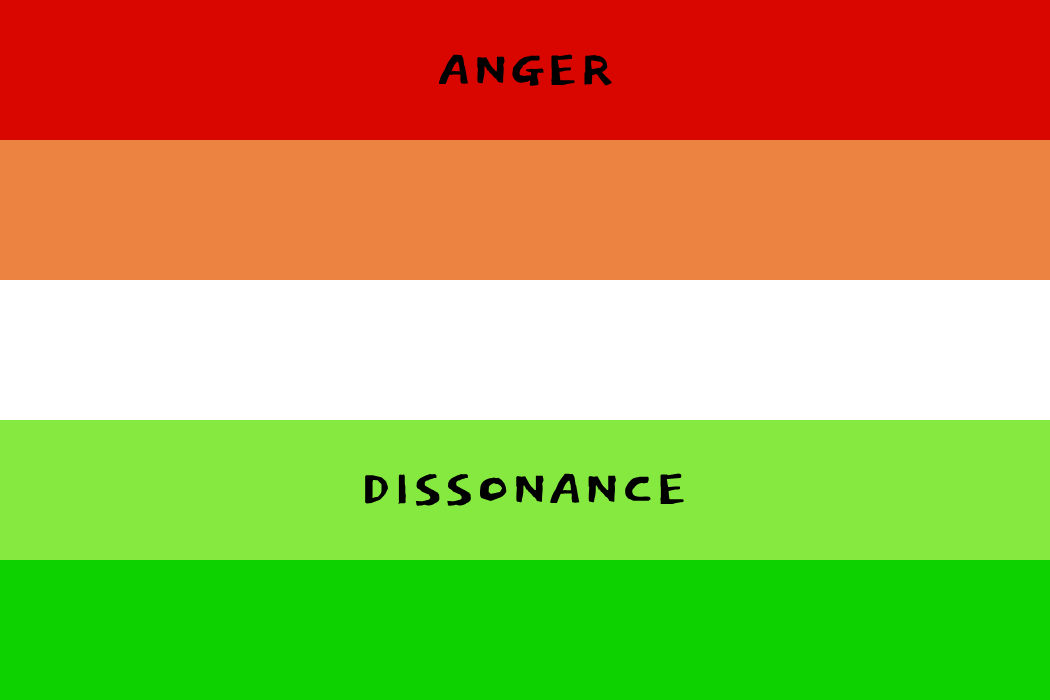
<style>
.page{position:relative;width:1050px;height:700px;background:#ec8340}
.page>*{position:absolute;margin:0}
.t1{font:60px "Dokdo-Regular";color:#000000}
</style>
<div class="page">
<p class="t1" style="left:438px;top:54px;width:174px;height:32px">ANGER</p>
<p class="t1" style="left:365px;top:473px;width:319px;height:33px">DISSONANCE</p>
</div>
